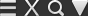
<style>
.page{position:relative;width:88px;height:16px;background:#333333}
.page>*{position:absolute;margin:0}
.t1{font:23px "SegoeUI";color:#e9e9e9;scale:1.16 1}
</style>
<div class="page">
<p class="t1" style="left:24px;top:0px;width:16px;height:16px">X</p>
</div>
